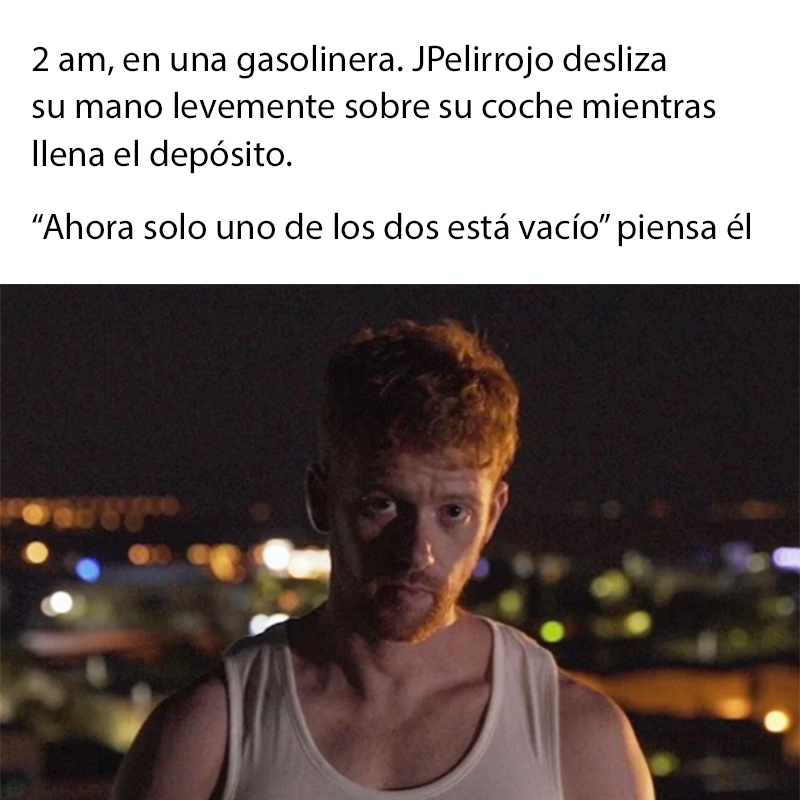
<style>
.page{position:relative;width:800px;height:800px;background:#ffffff}
.page>*{position:absolute;margin:0}
.t1{font:37.1px "MyriadPro-Regular";color:#000000}
</style>
<div class="page">
<p class="t1" style="left:32px;top:44px;width:718px;height:203px">2 am, en una gasolinera. JPelirrojo desliza<br>su mano levemente sobre su coche mientras<br>llena el depósito.<br>“Ahora solo uno de los dos está vacío” piensa él</p>
</div>
